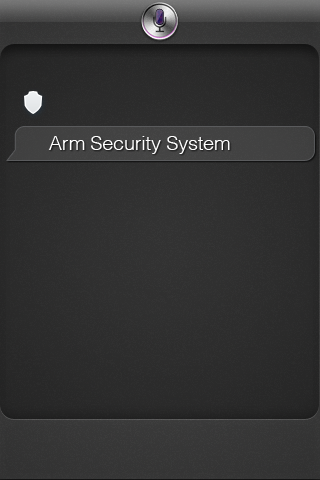
<style>
.page{position:relative;width:320px;height:480px}
.page>*{position:absolute;margin:0}
.t1{font:19.5px "Helvetica-Light";color:#ffffff}
</style>
<div class="page">
<p class="t1" style="left:48px;top:136px;width:182px;height:18px">Arm Security System</p>
</div>
